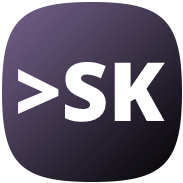
<style>
.page{position:relative;width:183px;height:183px;background:#ffffff}
.page>*{position:absolute;margin:0}
.t1{font:81.6px "OpenSans-Extrabold";color:#ffffff}
</style>
<div class="page">
<p class="t1" style="left:18px;top:62px;width:147px;height:60px">&gt;SK</p>
</div>
